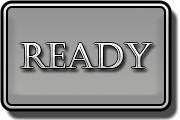
<style>
.page{position:relative;width:180px;height:120px}
.page>*{position:absolute;margin:0}
.t1{font:34.6px "Castellar"}
.t2{font:34.6px "PerpetuaTitlingMT-Bold";scale:0.6 1}
</style>
<div class="page">
<p class="t1" style="left:20px;top:43px;width:133px;height:25px"><span class="t2"><br></span>Ready</p>
</div>
